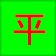
<style>
.page{position:relative;width:56px;height:56px;background:#00ff00}
.page>*{position:absolute;margin:0}
.t1{font:37.3px "MS-PGothic";color:#ff0000}
</style>
<div class="page">
<p class="t1" style="left:13px;top:14px;width:33px;height:31px">平</p>
</div>
